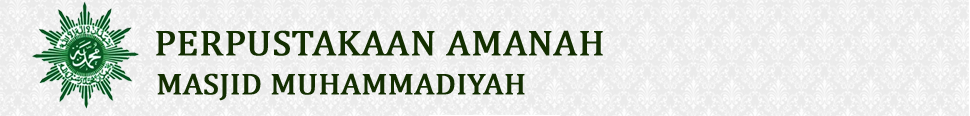
<style>
.page{position:relative;width:970px;height:116px}
.page>*{position:absolute;margin:0}
.t1{font:36px "Cambria";color:#132e01;font-weight:bold;scale:1.05 1}
.t2{font:30px "Cambria";color:#132e01;font-weight:bold;scale:1.05 1}
</style>
<div class="page">
<p class="t1" style="left:156px;top:30px;width:447px;height:26px">PERPUSTAKAAN AMANAH</p>
<p class="t2" style="left:157px;top:73px;width:368px;height:28px">MASJID MUHAMMADIYAH</p>
</div>
